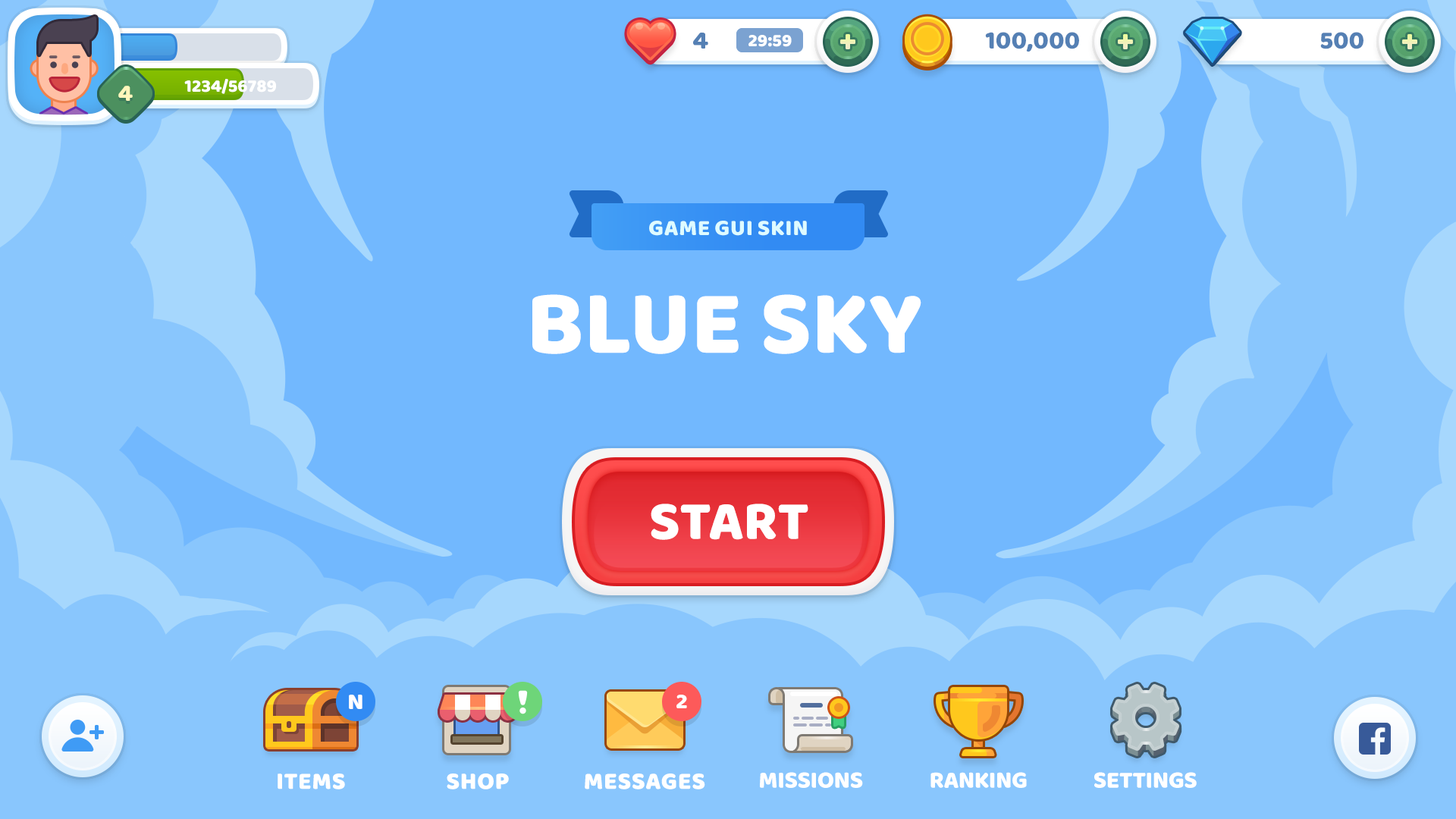
<style>
.page{position:relative;width:1456px;height:819px;background:#72b8fe}
.page>*{position:absolute;margin:0}
.t1{font:25.8px "BalooBhaijaan-Regular";color:#5580b4;text-transform:uppercase}
.t2{font:18.2px "BalooBhaijaan-Regular";color:#ffffff;text-transform:uppercase}
.t3{font:24.3px "BalooBhaijaan-Regular";color:#fff7bc;text-transform:uppercase}
.t4{font:22.7px "BalooBhaijaan-Regular";color:#defbff;text-transform:uppercase}
.t5{font:92.5px "BalooBhaijaan-Regular";color:#ffffff;text-transform:uppercase}
.t6{font:56.1px "BalooBhaijaan-Regular";color:#ffffff;text-transform:uppercase}
.t7{font:24.3px "BalooBhaijaan-Regular";color:#ffffff}
.t8{font:22.7px "BalooBhaijaan-Regular";color:#ffffff}
.t9{font:24.3px "BalooBhaijaan-Regular";color:#ffffff;text-transform:uppercase}
</style>
<div class="page">
<p class="t1" style="left:693px;top:32px;width:15px;height:17px">4</p>
<p class="t2" style="left:748px;top:35px;width:44px;height:12px">29:59</p>
<p class="t1" style="left:985px;top:32px;width:94px;height:20px">100,000</p>
<p class="t1" style="left:1320px;top:32px;width:43px;height:17px">500</p>
<p class="t3" style="left:118px;top:86px;width:15px;height:15px">4</p>
<p class="t2" style="left:184px;top:79px;width:92px;height:15px">1234/56789</p>
<p class="t4" style="left:649px;top:221px;width:158px;height:15px">Game GUI sKIN</p>
<p class="t5" style="left:532px;top:294px;width:389px;height:60px">Blue Sky</p>
<p class="t6" style="left:651px;top:504px;width:157px;height:36px">Start</p>
<p class="t7" style="left:349px;top:695px;width:13px;height:14px">N</p>
<p class="t8" style="left:676px;top:695px;width:11px;height:13px">2</p>
<p class="t9" style="left:278px;top:773px;width:67px;height:16px">Items</p>
<p class="t9" style="left:447px;top:773px;width:62px;height:16px">Shop</p>
<p class="t9" style="left:585px;top:773px;width:120px;height:16px">Messages</p>
<p class="t9" style="left:760px;top:772px;width:103px;height:16px">Missions</p>
<p class="t9" style="left:930px;top:772px;width:97px;height:16px">Ranking</p>
<p class="t9" style="left:1094px;top:772px;width:103px;height:16px">Settings</p>
</div>
